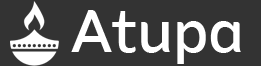
<style>
.page{position:relative;width:261px;height:66px;background:#333333}
.page>*{position:absolute;margin:0}
.t1{font:60px "AminoAlt-Regular5";color:#ffffff}
</style>
<div class="page">
<p class="t1" style="left:71px;top:10px;width:170px;height:54px">Atupa</p>
</div>
